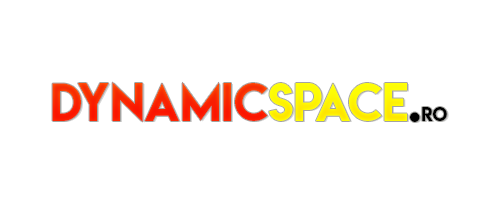
<style>
.page{position:relative;width:500px;height:200px;background:#ffffff}
.page>*{position:absolute;margin:0}
.t1{font:47.5px "LemonMilk"}
.t2{font:17px "LemonMilk"}
</style>
<div class="page">
<p class="t1" style="left:52px;top:82px;width:395px;height:40px">dynamicspace.<span class="t2">ro</span></p>
</div>
